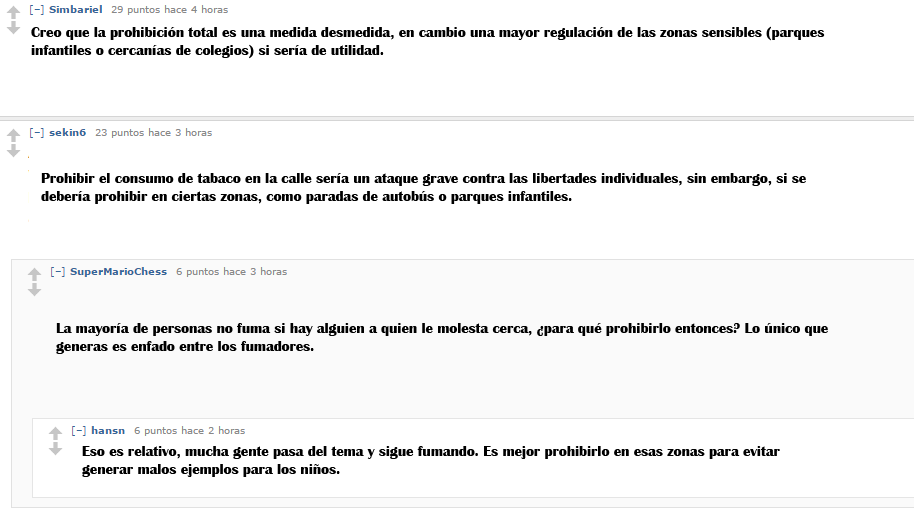
<style>
.page{position:relative;width:914px;height:512px;background:#ffffff}
.page>*{position:absolute;margin:0}
.t1{font:14.7px "BritannicBold";color:#000000}
</style>
<div class="page">
<p class="t1" style="left:31px;top:26px;width:794px;height:33px">Creo que la prohibición total es una medida desmedida, en cambio una mayor regulación de las zonas sensibles (parques infantiles o cercanías de colegios) si sería de utilidad.</p>
<p class="t1" style="left:41px;top:173px;width:765px;height:31px">Prohibir el consumo de tabaco en la calle sería un ataque grave contra las libertades individuales, sin embargo, si se debería prohibir en ciertas zonas, como paradas de autobús o parques infantiles.</p>
<p class="t1" style="left:56px;top:323px;width:772px;height:31px">La mayoría de personas no fuma si hay alguien a quien le molesta cerca, ¿para qué prohibirlo entonces? Lo único que generas es enfado entre los fumadores.</p>
<p class="t1" style="left:82px;top:446px;width:698px;height:31px">Eso es relativo, mucha gente pasa del tema y sigue fumando. Es mejor prohibirlo en esas zonas para evitar generar malos ejemplos para los niños.</p>
</div>
